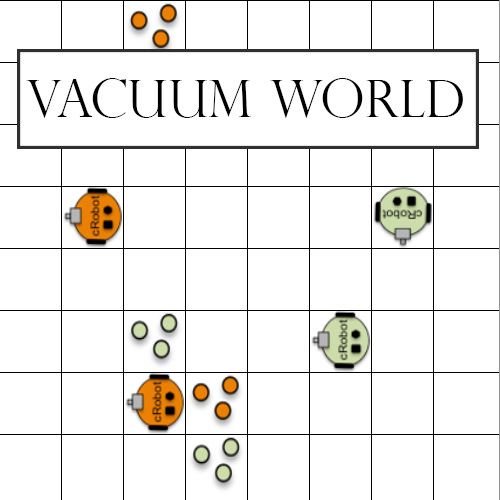
<style>
.page{position:relative;width:500px;height:500px;background:#ffffff}
.page>*{position:absolute;margin:0}
.t1{font:51.9px "PerpetuaTitlingMT-Light";color:#000000}
</style>
<div class="page">
<p class="t1" style="left:26px;top:78px;width:437px;height:40px">vacuum world</p>
</div>
